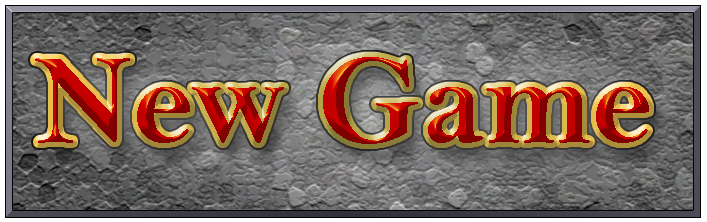
<style>
.page{position:relative;width:707px;height:222px}
.page>*{position:absolute;margin:0}
.t1{font:129px "BellMTBold"}
</style>
<div class="page">
<p class="t1" style="left:35px;top:57px;width:614px;height:87px">New Game</p>
<p class="t1" style="left:35px;top:57px;width:614px;height:87px">New Game</p>
<p class="t1" style="left:35px;top:57px;width:614px;height:87px">New Game</p>
</div>
